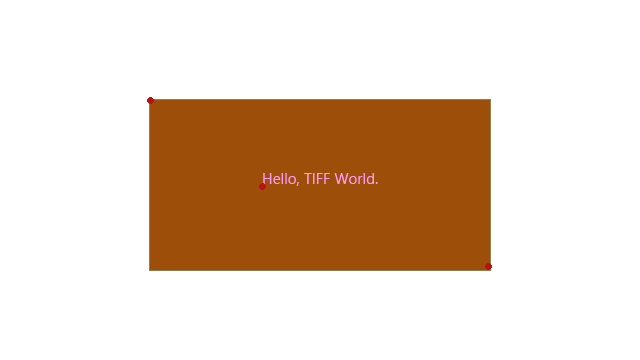
<style>
.page{position:relative;width:640px;height:360px;background:#ffffff}
.page>*{position:absolute;margin:0}
.t1{font:15px "SegoeUI";color:#f99af1}
</style>
<div class="page">
<p class="t1" style="left:263px;top:173px;width:115px;height:13px">Hello, TIFF World.</p>
</div>
